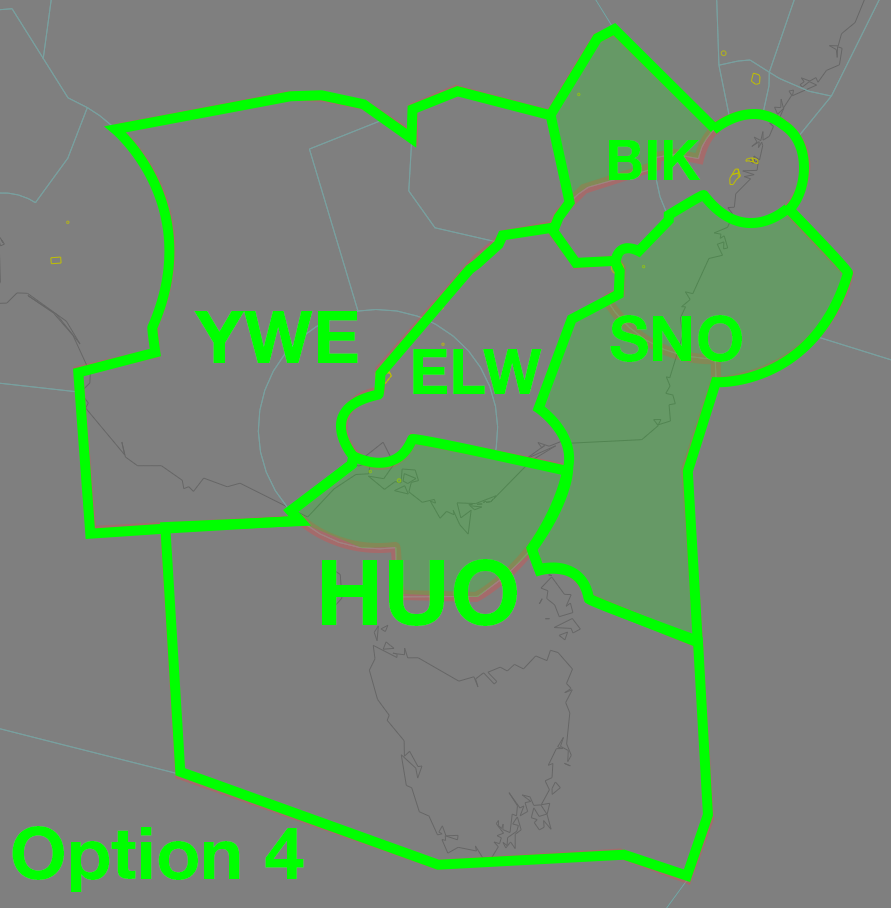
<style>
.page{position:relative;width:891px;height:908px;background:#7f7f7f}
.page>*{position:absolute;margin:0}
.t1{font:55.3px "HelveticaNeueLTStd-Bd";color:#00ff00}
.t2{font:72.5px "HelveticaNeueLTStd-Bd";color:#00ff00}
.t3{font:63px "HelveticaNeueLTStd-Bd";color:#00ff00}
.t4{font:91.6px "HelveticaNeueLTStd-Bd";color:#00ff00}
</style>
<div class="page">
<p class="t1" style="left:609px;top:140px;width:92px;height:40px">BIK</p>
<p class="t2" style="left:194px;top:311px;width:164px;height:52px">YWE</p>
<p class="t3" style="left:610px;top:315px;width:132px;height:47px">SNO</p>
<p class="t3" style="left:413px;top:349px;width:129px;height:45px">ELW</p>
<p class="t4" style="left:322px;top:559px;width:195px;height:67px">HUO</p>
<p class="t2" style="left:12px;top:826px;width:292px;height:66px">Option 4</p>
</div>
